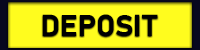
<style>
.page{position:relative;width:200px;height:50px;background:#fffc1e}
.page>*{position:absolute;margin:0}
.t1{font:30px "Bahnschrift-Bold";color:#000000}
</style>
<div class="page">
<p class="t1" style="left:42px;top:14px;width:116px;height:23px">DEPOSIT</p>
</div>
